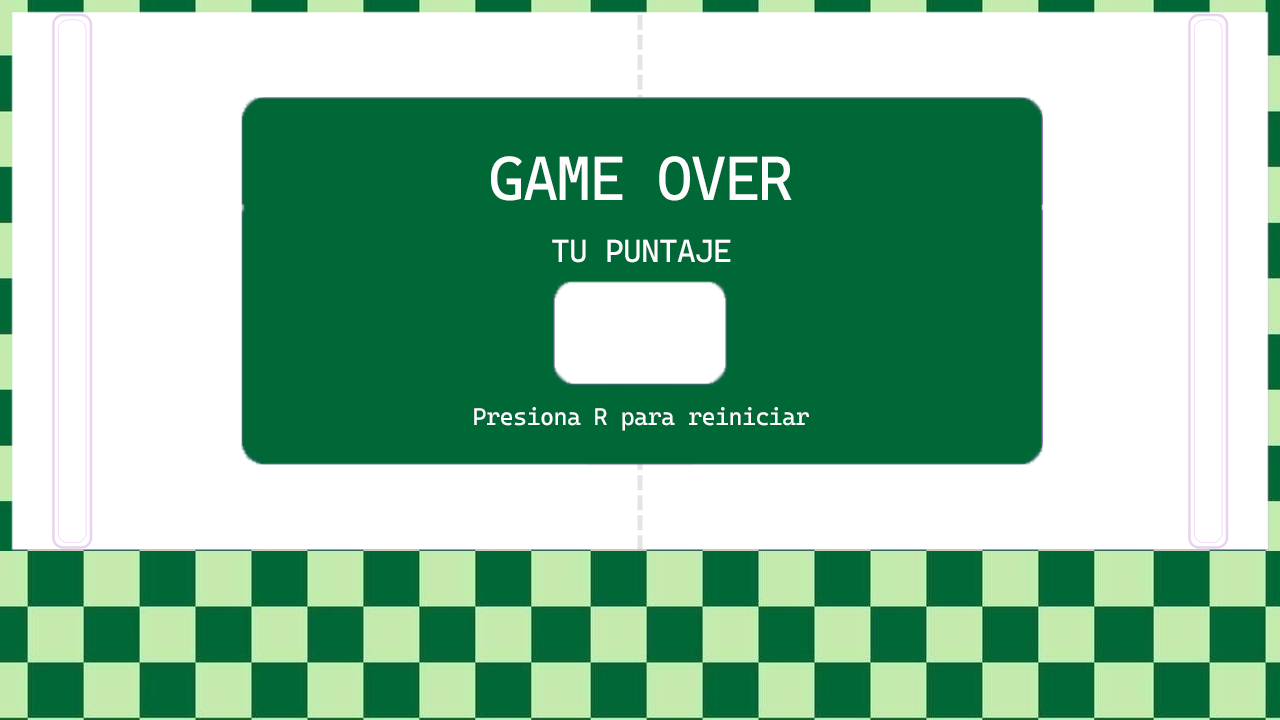
<style>
.page{position:relative;width:1280px;height:720px;background:#ffffff}
.page>*{position:absolute;margin:0}
.t1{font:62.4px "CascadiaCode-Roman";letter-spacing:-0.025em;color:#fdfdfe;scale:0.96 1}
.t2{font:32px "CascadiaCode-Roman";letter-spacing:-0.025em;color:#fdfdfe}
.t3{font:24px "CascadiaCode-Roman";letter-spacing:-0.025em;color:#fdfdfe}
</style>
<div class="page">
<p class="t1" style="left:491px;top:156px;width:301px;height:45px">GAME OVER</p>
<p class="t2" style="left:552px;top:239px;width:179px;height:24px">TU PUNTAJE</p>
<p class="t3" style="left:474px;top:407px;width:335px;height:24px">Presiona R para reiniciar</p>
</div>
